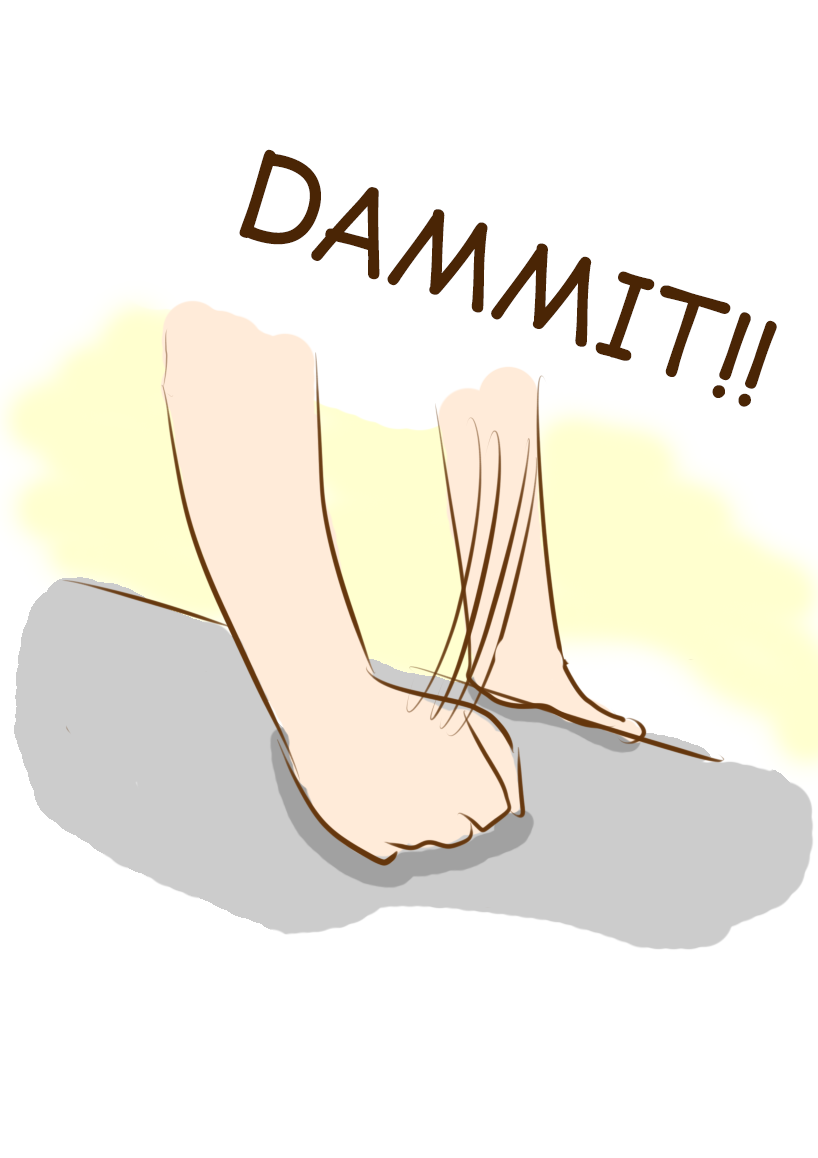
<style>
.page{position:relative;width:818px;height:1158px;background:#ffffff}
.page>*{position:absolute;margin:0}
.t1{font:112.5px "JollyGoodSans-Basic";color:#4a2505}
</style>
<div class="page">
<p class="t1" style="left:239px;top:149px;width:538px;height:258px;rotate:18deg">DAMMIT!!</p>
</div>
